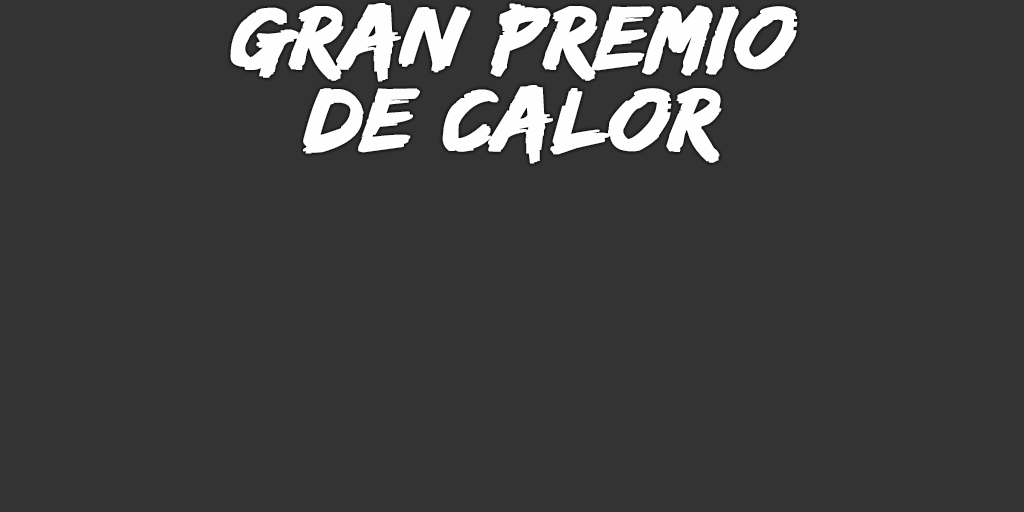
<style>
.page{position:relative;width:1024px;height:512px;background:#333333}
.page>*{position:absolute;margin:0}
.t1{font:93px/82px "EdoSZ";color:#fefefe;font-weight:bold;font-style:italic;scale:1.04 1}
</style>
<div class="page">
<p class="t1" style="left:230px;top:3px;width:568px;height:161px;text-align:center">gran premio<br>de calor</p>
</div>
